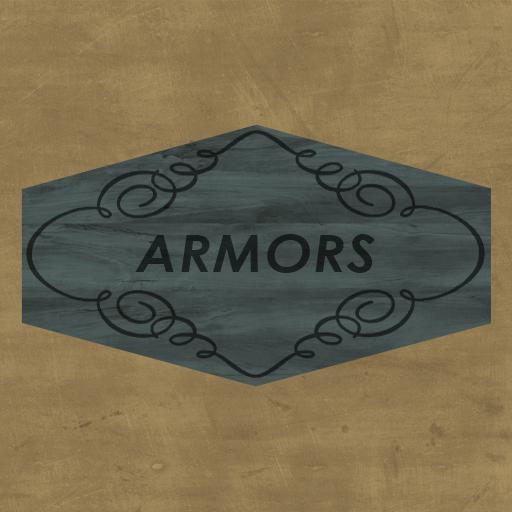
<style>
.page{position:relative;width:512px;height:512px}
.page>*{position:absolute;margin:0}
.t1{font:52px "CenturyGothic-BoldItalic";letter-spacing:0.025em;color:#191f1d;text-transform:uppercase;scale:1.07 1}
</style>
<div class="page">
<p class="t1" style="left:135px;top:234px;width:240px;height:39px">armors</p>
</div>
